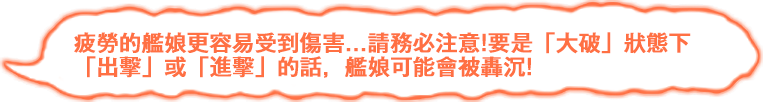
<style>
.page{position:relative;width:763px;height:102px;background:#ffffff}
.page>*{position:absolute;margin:0}
.t1{font:22px/24px "GothicMB101Pr6N-Medium";color:#ff7043;font-weight:bold}
</style>
<div class="page">
<p class="t1" style="left:74px;top:32px;width:617px;height:46px">疲勞的艦娘更容易受到傷害...請務必注意!要是「大破」狀態下<br>「出擊」或「進擊」的話，艦娘可能會被轟沉!</p>
</div>
